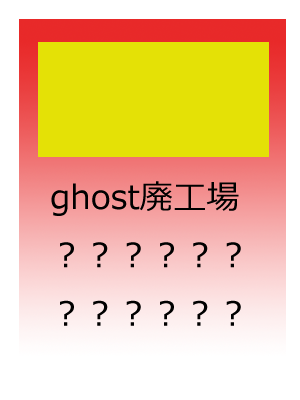
<style>
.page{position:relative;width:300px;height:400px;background:#ffffff}
.page>*{position:absolute;margin:0}
.t1{font:33.3px "Meiryo";color:#000000}
</style>
<div class="page">
<p class="t1" style="left:51px;top:181px;width:190px;height:145px">ghost廃工場<br>？？？？？？<br>？？？？？？</p>
</div>
